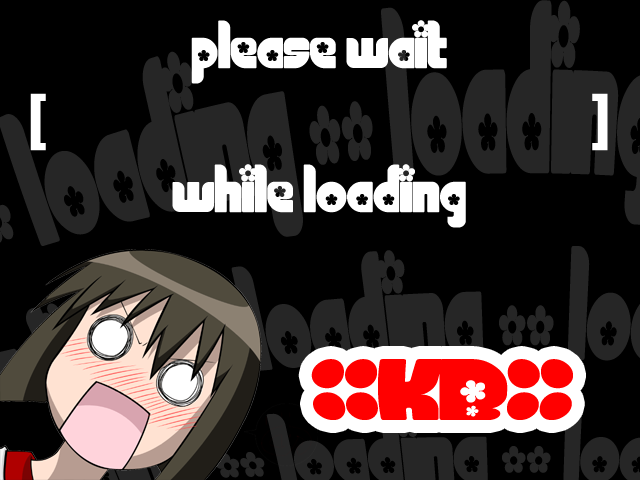
<style>
.page{position:relative;width:640px;height:480px;background:#000000}
.page>*{position:absolute;margin:0}
.t1{font:60px "Chick";color:#ffffff}
.t2{font:110px "Chick";color:#ff0000}
</style>
<div class="page">
<p class="t1" style="left:30px;top:20px;width:578px;height:208px;text-align:center">please wait<br>[                                                     ]<br>while loading</p>
<p class="t2" style="left:311px;top:359px;width:262px;height:61px">::KB::</p>
</div>
